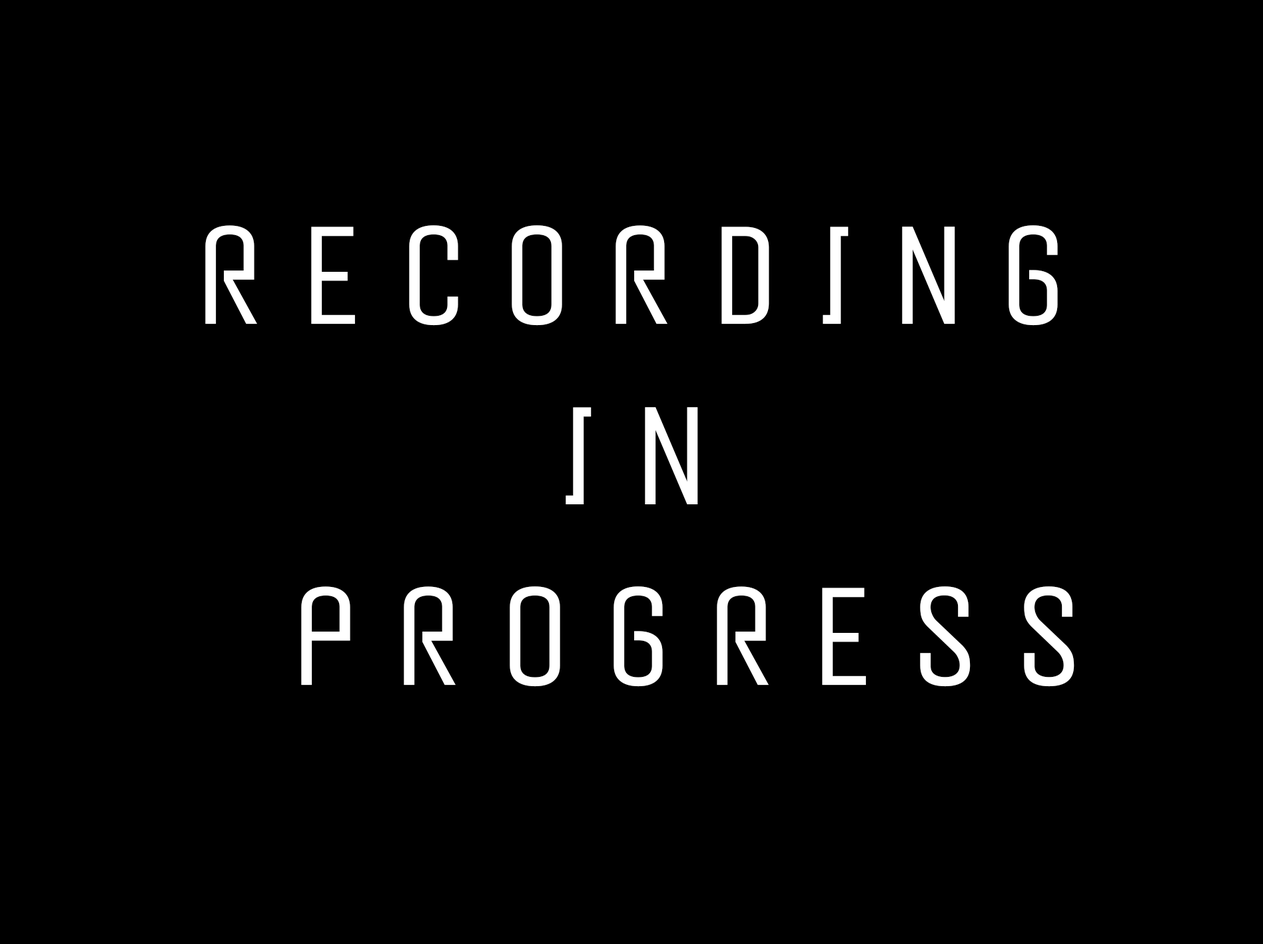
<style>
.page{position:relative;width:1263px;height:944px;background:#000000}
.page>*{position:absolute;margin:0}
.t1{font:138.8px/180.4px "PeytonDisplay-ExtraLight";letter-spacing:0.28em;color:#ffffff}
</style>
<div class="page">
<p class="t1" style="left:205px;top:225px;width:870px;height:462px;text-align:center">RECORDING <br>IN<br> PROGRESS</p>
</div>
